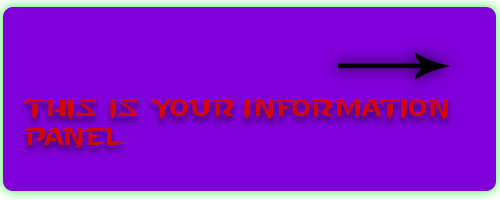
<style>
.page{position:relative;width:500px;height:200px;background:#8000d9}
.page>*{position:absolute;margin:0}
.t1{font:24px "StarcraftNormal";color:#d20606}
</style>
<div class="page">
<p class="t1" style="left:24px;top:99px;width:424px;height:49px">This is your information panel</p>
</div>
